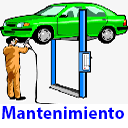
<style>
.page{position:relative;width:128px;height:128px;background:#f6f6f6}
.page>*{position:absolute;margin:0}
.t1{font:18px "MyriadPro-Bold";color:#0000ff}
</style>
<div class="page">
<p class="t1" style="left:2px;top:106px;width:122px;height:13px">Mantenimiento</p>
</div>
